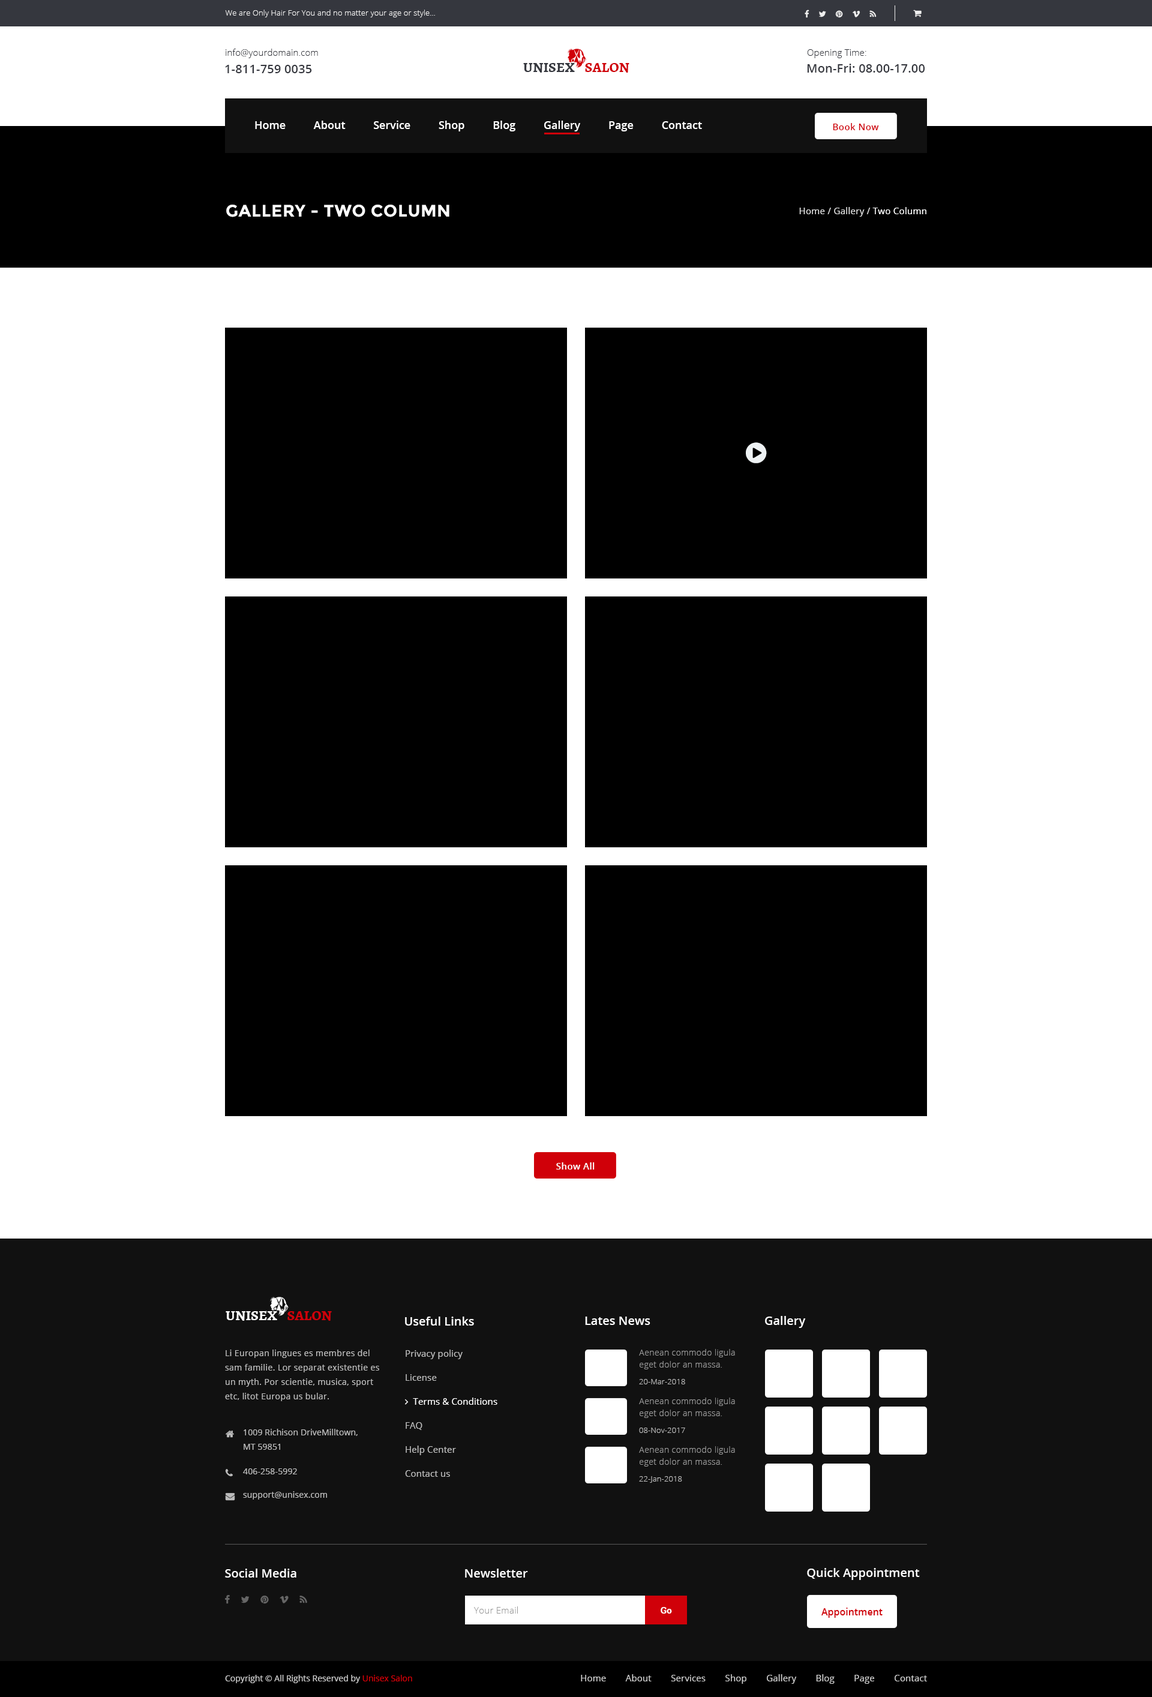
<style>
.page{position:relative;width:1152px;height:1697px;background:#ffffff}
.page>*{position:absolute;margin:0}
.t1{font:7.8px "OpenSans-Light";letter-spacing:0.01em;color:#efefef}
.t2{font:9px "OpenSans-Light";letter-spacing:0.01em;color:#35373e}
.t3{font:12px "OpenSans-Semibold";letter-spacing:0.01em;color:#35373e}
.t4{font:14.4px "Alegreya-Bold";color:#35373e;text-transform:uppercase}
.t5{font:14.4px "Alegreya-Bold";color:#d00009;text-transform:uppercase}
.t6{font:10.8px "OpenSans-Semibold";color:#ffffff}
.t7{font:9px "OpenSans-Semibold";letter-spacing:0.03em;color:#d00009}
.t8{font:16.8px "Montserrat-Bold";letter-spacing:0.02em;color:#ffffff;text-transform:uppercase}
.t9{font:9px "OpenSans";letter-spacing:0.02em;color:#dddddd}
.t10{font:9px "OpenSans";letter-spacing:0.02em;color:#ffffff}
.t11{font:9px "OpenSans-Semibold";letter-spacing:0.03em;color:#fffefe}
.t12{font:14.4px "Alegreya-Bold";color:#ffffff;text-transform:uppercase}
.t13{font:12px "OpenSans-Semibold";color:#ffffff}
.t14{font:8.4px/14.4px "OpenSans";letter-spacing:0.03em;color:#bbbbbb}
.t15{font:8.4px/12px "OpenSans-Light";letter-spacing:0.03em;color:#999999}
.t16{font:7.8px "OpenSans-Light";letter-spacing:0.01em;color:#bbbbbb}
.t17{font:8.4px/14.4px "OpenSans";letter-spacing:0.01em;color:#bbbbbb}
.t18{font:8.4px "OpenSans";letter-spacing:0.01em;color:#bbbbbb}
.t19{font:9px "OpenSans-Light";letter-spacing:0.02em;color:#999999}
.t20{font:9px "RobotoSlab-Bold";letter-spacing:0.02em;color:#ffffff}
.t21{font:9.6px "OpenSans-Semibold";color:#d00009}
.t22{font:8.4px "OpenSans";color:#cccccc}
.t23{font:8.4px "OpenSans";color:#d00009}
.t24{font:9px "OpenSans";letter-spacing:0.01em;color:#cccccc}
</style>
<div class="page">
<p class="t1" style="left:225px;top:10px;width:210px;height:7px">We are Only Hair For You and no matter your age or style...</p>
<p class="t2" style="left:226px;top:49px;width:92px;height:9px">info@yourdomain.com</p>
<p class="t2" style="left:807px;top:49px;width:59px;height:9px">Opening Time:</p>
<p class="t3" style="left:225px;top:65px;width:87px;height:8px">1-811-759 0035</p>
<p class="t4" style="left:523px;top:62px;width:106px;height:11px">Unisex    <span class="t5">Salon</span></p>
<p class="t3" style="left:807px;top:64px;width:118px;height:9px">Mon-Fri: 08.00-17.00</p>
<p class="t6" style="left:255px;top:121px;width:447px;height:10px">Home          About          Service          Shop          Blog          Gallery          Page          Contact</p>
<p class="t7" style="left:833px;top:123px;width:46px;height:7px">Book Now</p>
<p class="t8" style="left:226px;top:205px;width:223px;height:12px">Gallery - Two column</p>
<p class="t9" style="left:799px;top:207px;width:127px;height:10px">Home / Gallery / <span class="t10">Two Column</span></p>
<p class="t11" style="left:556px;top:1162px;width:39px;height:7px">Show All</p>
<p class="t12" style="left:226px;top:1310px;width:106px;height:11px">Unisex    <span class="t5">Salon</span></p>
<p class="t13" style="left:405px;top:1316px;width:69px;height:9px">Useful Links</p>
<p class="t13" style="left:585px;top:1316px;width:65px;height:9px">Lates News</p>
<p class="t13" style="left:765px;top:1316px;width:41px;height:12px">Gallery</p>
<p class="t14" style="left:225px;top:1349px;width:154px;height:52px">Li Europan lingues es membres del sam familie. Lor separat existentie es un myth. Por scientie, musica, sport etc, litot Europa us bular.</p>
<p class="t15" style="left:639px;top:1349px;width:96px;height:20px">Aenean commodo ligula eget dolor an massa.</p>
<p class="t16" style="left:639px;top:1379px;width:46px;height:5px">20-Mar-2018</p>
<p class="t15" style="left:639px;top:1397px;width:96px;height:21px">Aenean commodo ligula eget dolor an massa.</p>
<p class="t17" style="left:244px;top:1429px;width:114px;height:21px">1009 Richison DriveMilltown, <br>MT 59851</p>
<p class="t16" style="left:639px;top:1427px;width:46px;height:6px">08-Nov-2017</p>
<p class="t15" style="left:639px;top:1446px;width:96px;height:20px">Aenean commodo ligula eget dolor an massa.</p>
<p class="t18" style="left:243px;top:1468px;width:54px;height:6px">406-258-5992</p>
<p class="t16" style="left:639px;top:1476px;width:43px;height:7px">22-Jan-2018</p>
<p class="t18" style="left:243px;top:1491px;width:84px;height:8px">support@unisex.com</p>
<p class="t13" style="left:225px;top:1568px;width:71px;height:9px">Social Media</p>
<p class="t13" style="left:465px;top:1568px;width:63px;height:9px">Newsletter</p>
<p class="t13" style="left:807px;top:1568px;width:113px;height:12px">Quick Appointment</p>
<p class="t19" style="left:474px;top:1606px;width:44px;height:7px">Your Email</p>
<p class="t20" style="left:661px;top:1607px;width:11px;height:6px">Go</p>
<p class="t21" style="left:821px;top:1607px;width:62px;height:11px">Appointment</p>
<p class="t22" style="left:225px;top:1675px;width:187px;height:8px">Copyright © All Rights Reserved by <span class="t23">Unisex Salon</span></p>
<p class="t24" style="left:581px;top:1674px;width:346px;height:10px">Home        About        Services        Shop        Gallery        Blog        Page        Contact</p>
</div>
